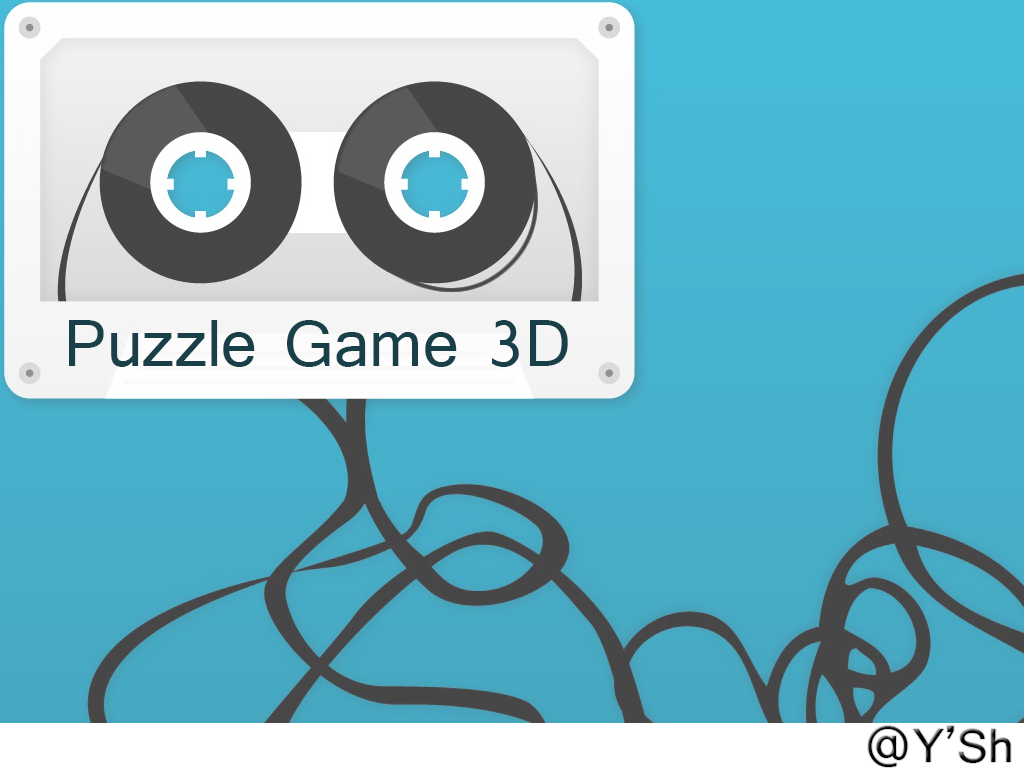
<style>
.page{position:relative;width:1024px;height:768px}
.page>*{position:absolute;margin:0}
.t1{font:69.4px "Shruti";color:#193f49}
.t2{font:50px "Shruti";color:#070707}
</style>
<div class="page">
<p class="t1" style="left:69px;top:320px;width:499px;height:47px">Puzzle Game 3D</p>
<p class="t2" style="left:868px;top:726px;width:143px;height:41px">@Y’Sh</p>
</div>
